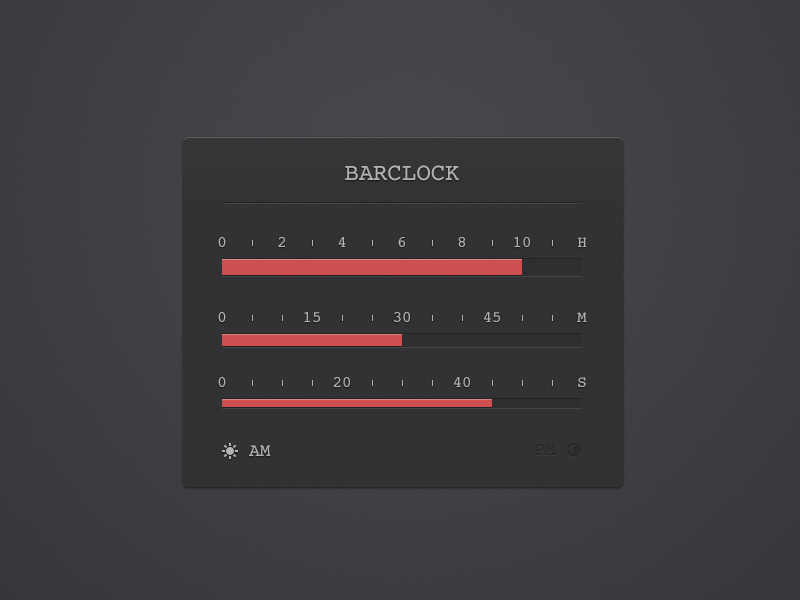
<style>
.page{position:relative;width:800px;height:600px}
.page>*{position:absolute;margin:0}
.t1{font:24px "Courier";color:#b3b3b3;text-transform:uppercase}
.t2{font:16px "Courier";color:#b3b3b3}
.t3{font:18px "Courier";color:#b3b3b3;text-transform:uppercase}
</style>
<div class="page">
<p class="t1" style="left:345px;top:165px;width:114px;height:16px">BARCLOCK</p>
<p class="t2" style="left:218px;top:237px;width:8px;height:10px">0</p>
<p class="t2" style="left:278px;top:237px;width:7px;height:10px">2</p>
<p class="t2" style="left:338px;top:237px;width:8px;height:10px">4</p>
<p class="t2" style="left:398px;top:237px;width:7px;height:10px">6</p>
<p class="t2" style="left:458px;top:237px;width:7px;height:10px">8</p>
<p class="t2" style="left:514px;top:237px;width:16px;height:10px">10</p>
<p class="t2" style="left:578px;top:237px;width:9px;height:10px">H</p>
<p class="t2" style="left:218px;top:312px;width:8px;height:10px">0</p>
<p class="t2" style="left:304px;top:312px;width:16px;height:10px">15</p>
<p class="t2" style="left:394px;top:312px;width:16px;height:10px">30</p>
<p class="t2" style="left:484px;top:312px;width:16px;height:10px">45</p>
<p class="t2" style="left:577px;top:312px;width:10px;height:10px">M</p>
<p class="t2" style="left:218px;top:377px;width:8px;height:10px">0</p>
<p class="t2" style="left:333px;top:377px;width:17px;height:10px">20</p>
<p class="t2" style="left:454px;top:377px;width:16px;height:10px">40</p>
<p class="t2" style="left:578px;top:377px;width:8px;height:10px">S</p>
<p class="t3" style="left:249px;top:445px;width:22px;height:11px">AM</p>
</div>
